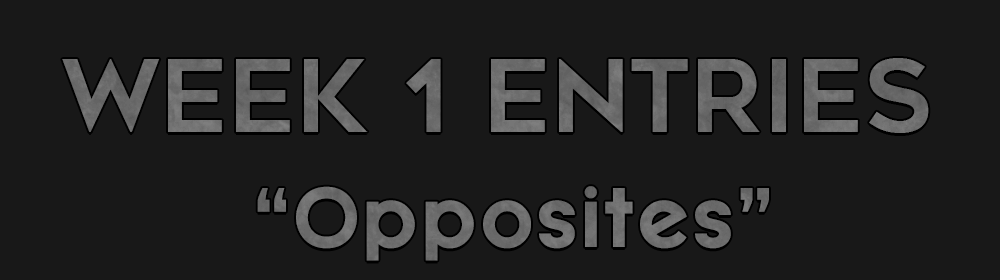
<style>
.page{position:relative;width:1000px;height:280px;background:#181818}
.page>*{position:absolute;margin:0}
.t1{font:100px "Geometos";color:#696969}
.t2{font:83.3px "MayekaBold";color:#6c6c6c}
</style>
<div class="page">
<p class="t1" style="left:62px;top:58px;width:867px;height:75px">Week 1 Entries</p>
<p class="t2" style="left:257px;top:186px;width:512px;height:75px">“Opposites”</p>
</div>
